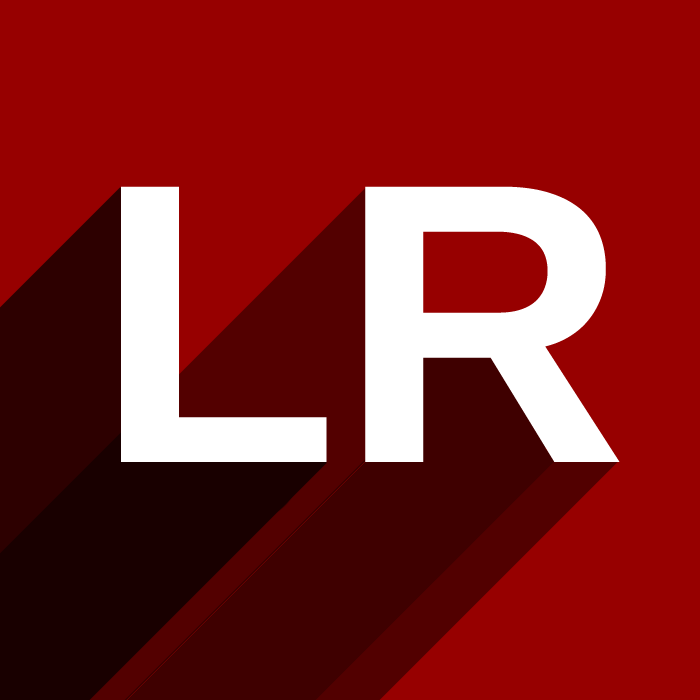
<style>
.page{position:relative;width:700px;height:700px;background:#970000}
.page>*{position:absolute;margin:0}
.t1{font:400px "LiberationSans-Bold";color:#ffffff}
</style>
<div class="page">
<p class="t1" style="left:121px;top:186px;width:499px;height:276px">LR</p>
</div>
